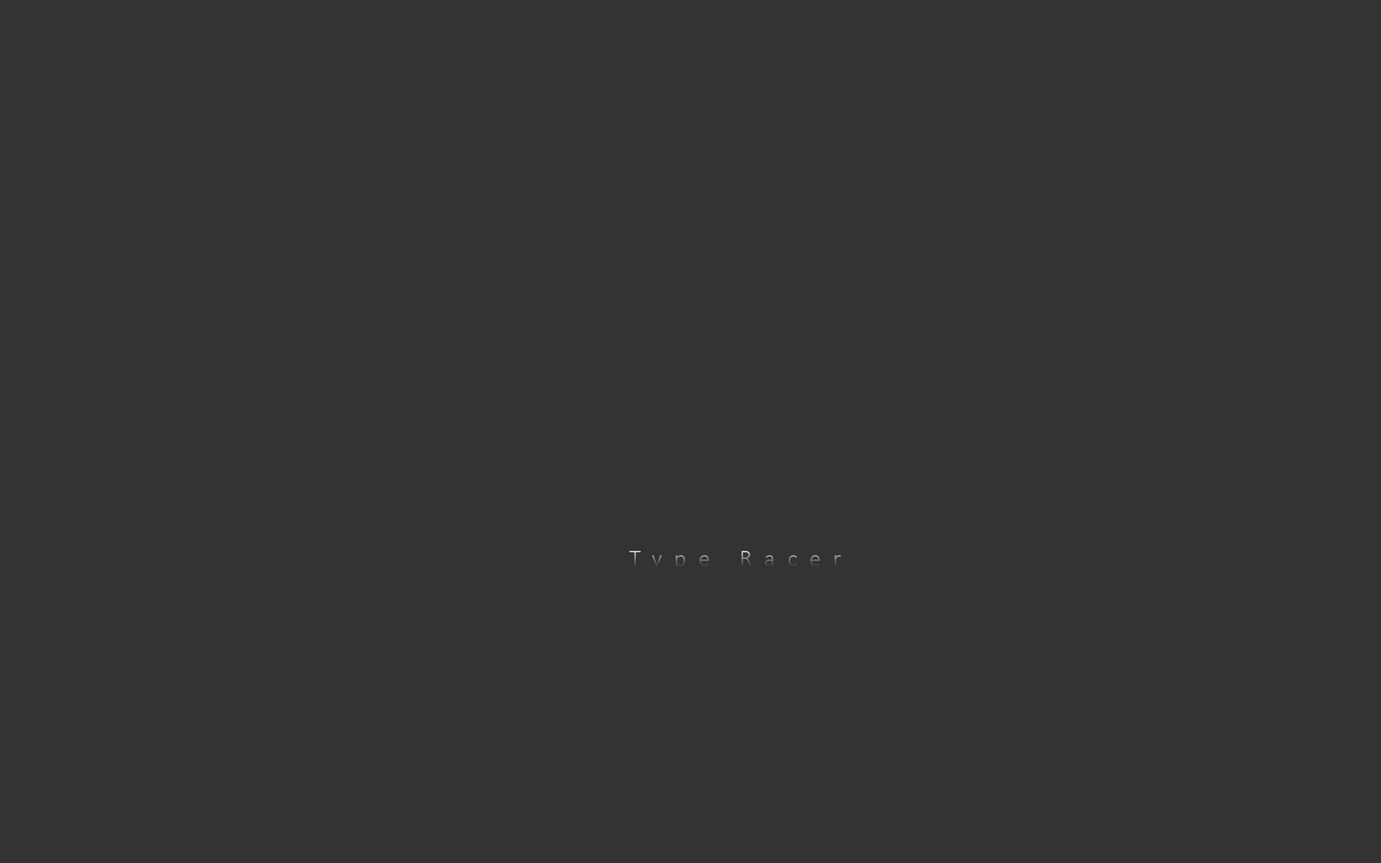
<style>
.page{position:relative;width:1381px;height:863px;background:#333333}
.page>*{position:absolute;margin:0}
.t1{font:23.9px "Calibri-Light";letter-spacing:0.5em}
</style>
<div class="page">
<p class="t1" style="left:629px;top:551px;width:212px;height:19px">Type Racer</p>
</div>
